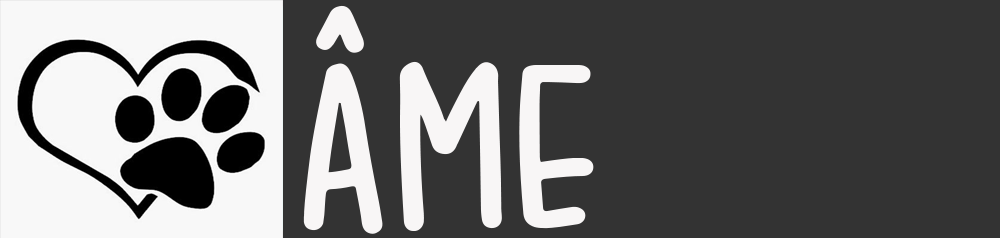
<style>
.page{position:relative;width:1000px;height:238px;background:#333333}
.page>*{position:absolute;margin:0}
.t1{font:249.1px "SKETCHYRegular";letter-spacing:0.05em;color:#f8f6f6;scale:1.09 1}
</style>
<div class="page">
<p class="t1" style="left:303px;top:5px;width:291px;height:229px">ÂME</p>
</div>
